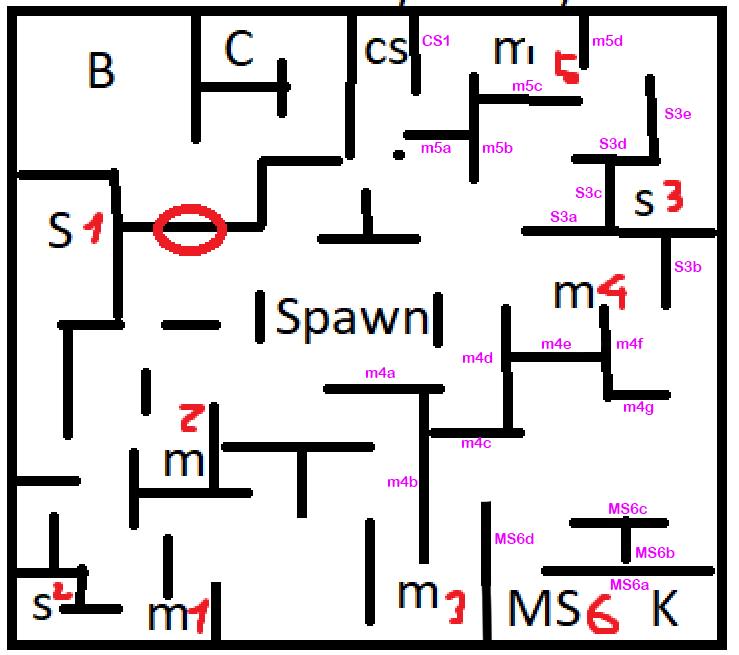
<style>
.page{position:relative;width:739px;height:655px;background:#ffffff}
.page>*{position:absolute;margin:0}
.t1{font:14.7px "ArialRoundedMTBold";color:#ee00ff}
</style>
<div class="page">
<p class="t1" style="left:422px;top:35px;width:27px;height:11px">CS1</p>
<p class="t1" style="left:592px;top:35px;width:31px;height:11px">m5d</p>
<p class="t1" style="left:512px;top:80px;width:30px;height:11px">m5c</p>
<p class="t1" style="left:665px;top:108px;width:27px;height:11px">S3e</p>
<p class="t1" style="left:421px;top:142px;width:30px;height:11px">m5a</p>
<p class="t1" style="left:482px;top:142px;width:31px;height:11px">m5b</p>
<p class="t1" style="left:599px;top:138px;width:27px;height:11px">S3d</p>
<p class="t1" style="left:575px;top:187px;width:27px;height:11px">S3c</p>
<p class="t1" style="left:550px;top:211px;width:27px;height:11px">S3a</p>
<p class="t1" style="left:674px;top:261px;width:28px;height:11px">S3b</p>
<p class="t1" style="left:541px;top:338px;width:31px;height:11px">m4e</p>
<p class="t1" style="left:616px;top:338px;width:28px;height:11px">m4f</p>
<p class="t1" style="left:462px;top:352px;width:31px;height:11px">m4d</p>
<p class="t1" style="left:365px;top:367px;width:30px;height:11px">m4a</p>
<p class="t1" style="left:623px;top:401px;width:31px;height:14px">m4g</p>
<p class="t1" style="left:461px;top:437px;width:30px;height:11px">m4c</p>
<p class="t1" style="left:387px;top:476px;width:31px;height:11px">m4b</p>
<p class="t1" style="left:609px;top:503px;width:38px;height:11px">MS6c</p>
<p class="t1" style="left:495px;top:533px;width:39px;height:11px">MS6d</p>
<p class="t1" style="left:636px;top:547px;width:39px;height:11px">MS6b</p>
<p class="t1" style="left:610px;top:579px;width:39px;height:11px">MS6a</p>
</div>
